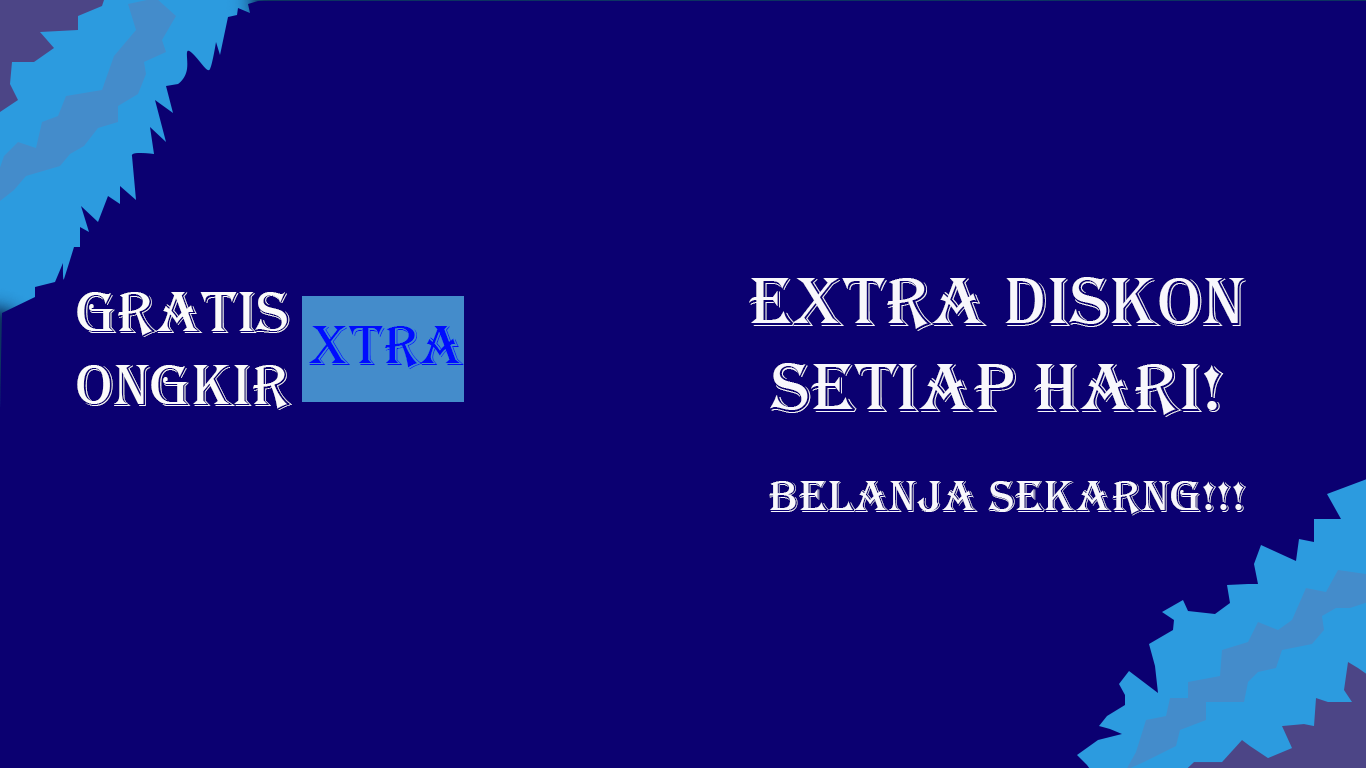
<style>
.page{position:relative;width:1366px;height:768px;background:#0b0071}
.page>*{position:absolute;margin:0}
.t1{font:72px "Algerian";color:#f8f7fc}
.t2{font:61px "Algerian";color:#fbfbfb}
.t3{font:58px "Algerian";color:#000cfe}
.t4{font:47px "Algerian";color:#f8f7fc}
</style>
<div class="page">
<p class="t1" style="left:749px;top:277px;width:497px;height:140px;text-align:center">Extra diskon<br>setiap hari!</p>
<p class="t2" style="left:77px;top:292px;width:215px;height:118px;text-align:center">Gratis<br>Ongkir</p>
<p class="t3" style="left:309px;top:326px;width:155px;height:43px">Xtra</p>
<p class="t4" style="left:769px;top:481px;width:477px;height:35px">Belanja sekarng!!!</p>
</div>
